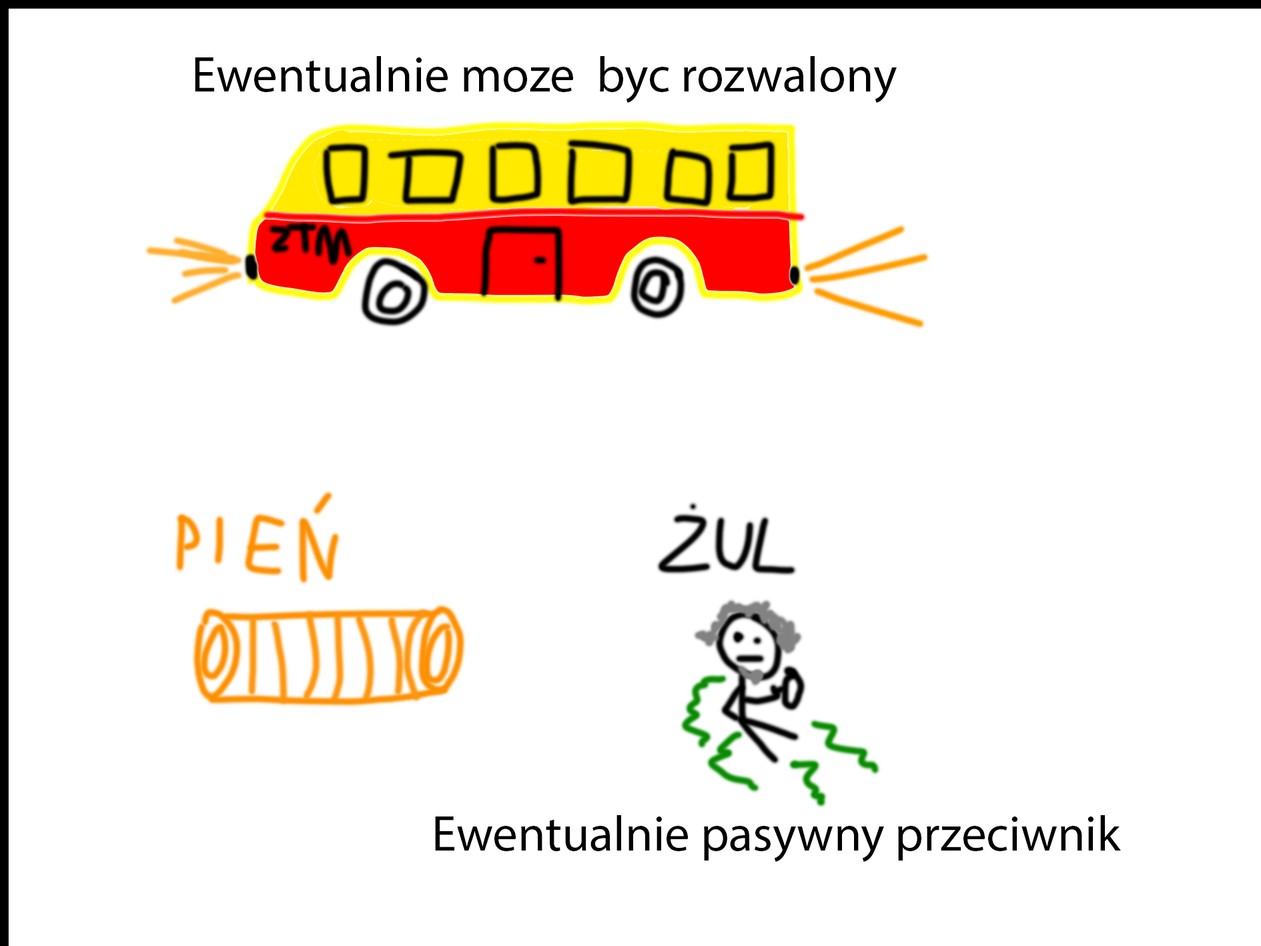
<style>
.page{position:relative;width:1261px;height:946px;background:#ffffff}
.page>*{position:absolute;margin:0}
.t1{font:50px "MyriadPro-Regular";color:#000000}
</style>
<div class="page">
<p class="t1" style="left:195px;top:56px;width:702px;height:47px">Ewentualnie moze  byc rozwalony</p>
<p class="t1" style="left:435px;top:815px;width:686px;height:46px">Ewentualnie pasywny przeciwnik</p>
</div>
